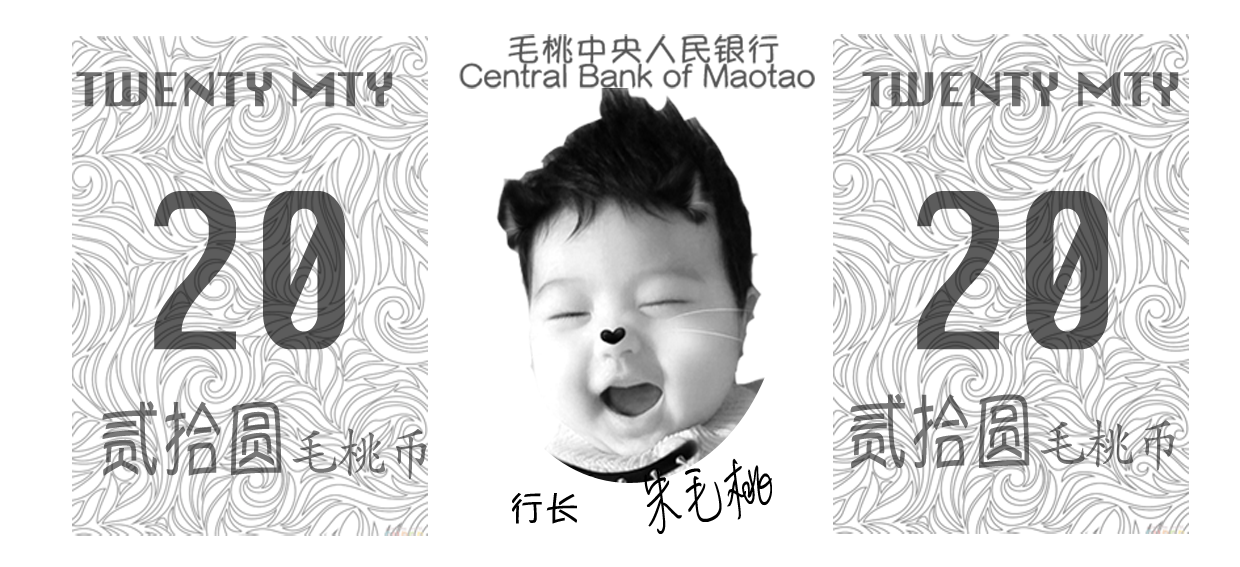
<style>
.page{position:relative;width:1240px;height:567px;background:#ffffff}
.page>*{position:absolute;margin:0}
.t1{font:45.1px "Silom";color:#696969;scale:1.1 1}
.t2{font:45.1px "Silom";color:#686868;scale:1.1 1}
.t3{font:210.8px "Silom";color:#585858;scale:0.77 1}
.t4{font:86.1px "YuppySC-Regular";color:#6f6f6f;scale:0.74 1}
.t5{font:86.1px "YuppySC-Regular";color:#707070;scale:0.74 1}
.t6{font:54.5px "STKaiti";color:#6d6d6d;scale:0.9 1}
.t7{font:54.5px "STKaiti";color:#717171;scale:0.9 1}
.t8{font:85.3px "MLingWaiMedium-SC";color:#000000;scale:0.67 1}
.t9{font:35.5px "YuppySC-Regular";color:#000000}
</style>
<div class="page">
<p class="t1" style="left:76px;top:72px;width:317px;height:35px">TWENTY MTY</p>
<p class="t2" style="left:862px;top:72px;width:317px;height:35px">TWENTY MTY</p>
<p class="t3" style="left:154px;top:191px;width:191px;height:159px">20</p>
<p class="t3" style="left:917px;top:191px;width:191px;height:159px">20</p>
<p class="t4" style="left:102px;top:401px;width:180px;height:75px">贰拾圆</p>
<p class="t5" style="left:850px;top:393px;width:180px;height:76px">贰拾圆</p>
<p class="t6" style="left:1040px;top:419px;width:135px;height:52px">毛桃币</p>
<p class="t7" style="left:292px;top:428px;width:135px;height:52px">毛桃币</p>
<p class="t8" style="left:644px;top:458px;width:128px;height:76px;rotate:-9deg">朱毛桃</p>
<p class="t9" style="left:512px;top:493px;width:65px;height:31px">行长</p>
</div>
